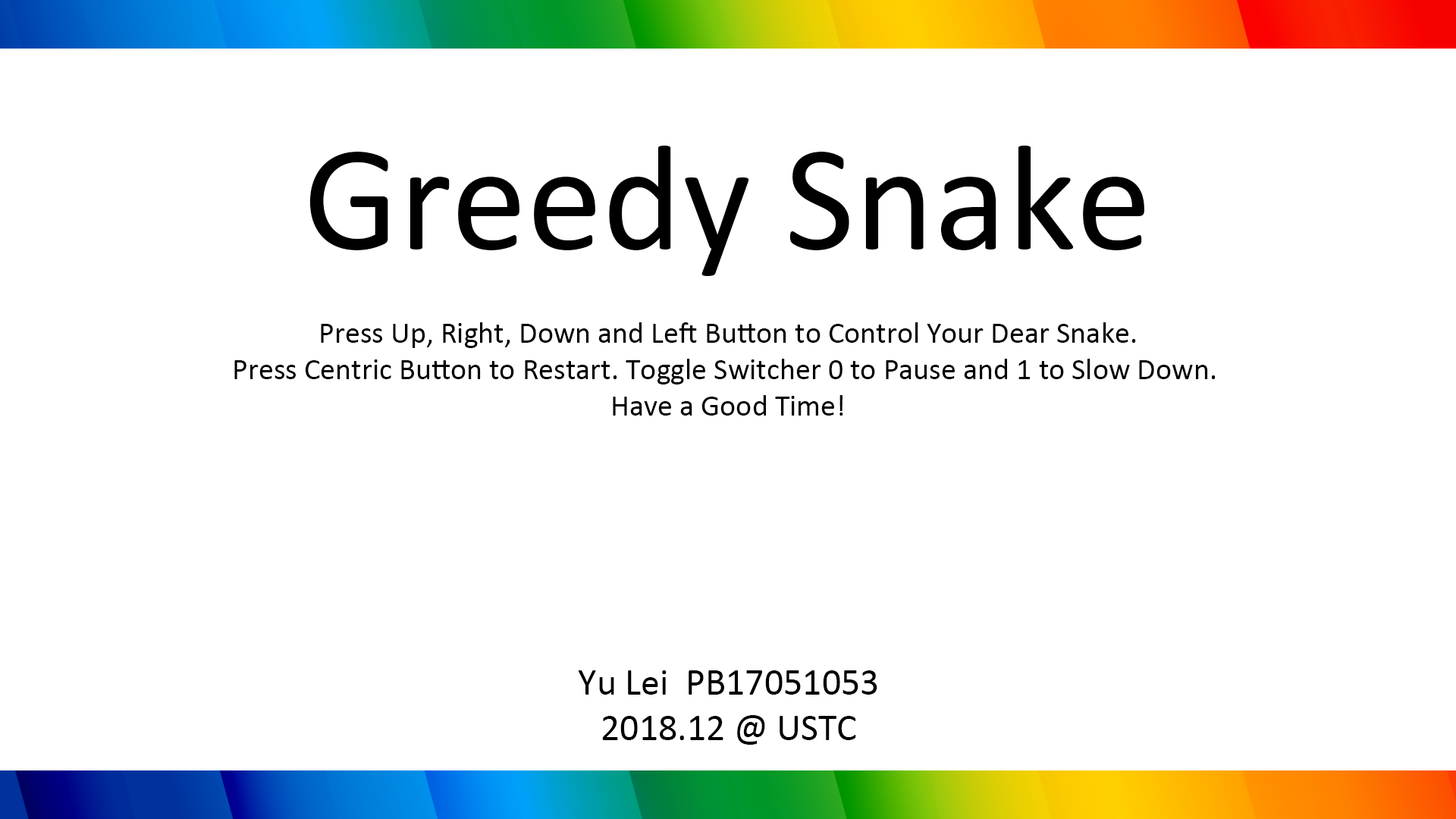
<style>
.page{position:relative;width:1456px;height:819px;background:#ffffff}
.page>*{position:absolute;margin:0}
.t1{font:151.7px "Calibri";color:#000000}
.t2{font:30.3px "Calibri";color:#000000}
.t3{font:37.9px "Calibri";color:#000000}
</style>
<div class="page">
<p class="t1" style="left:309px;top:146px;width:835px;height:130px">Greedy Snake</p>
<p class="t2" style="left:234px;top:322px;width:982px;height:94px;text-align:center">Press Up, Right, Down and Left Button to Control Your Dear Snake.<br>Press Centric Button to Restart. Toggle Switcher 0 to Pause and 1 to Slow Down. <br>Have a Good Time!</p>
<p class="t3" style="left:578px;top:670px;width:299px;height:75px;text-align:center">Yu Lei  PB17051053<br>2018.12 @ USTC</p>
</div>
